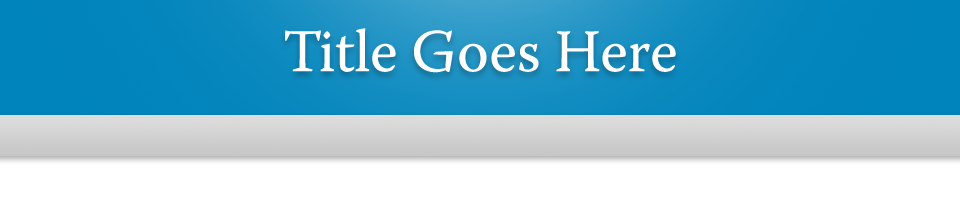
<style>
.page{position:relative;width:960px;height:202px;background:#ffffff}
.page>*{position:absolute;margin:0}
.t1{font:60px "WarnockPro-Regular";color:#ffffff}
</style>
<div class="page">
<p class="t1" style="left:285px;top:28px;width:391px;height:45px">Title Goes Here</p>
</div>
